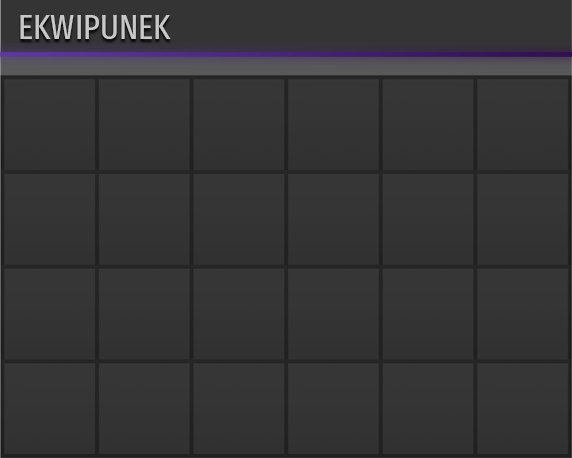
<style>
.page{position:relative;width:572px;height:458px}
.page>*{position:absolute;margin:0}
.t1{font:35.2px "FiraSansExtraCondensed-Regular";color:#c8c8c8}
</style>
<div class="page">
<p class="t1" style="left:20px;top:15px;width:151px;height:24px">EKWIPUNEK</p>
</div>
